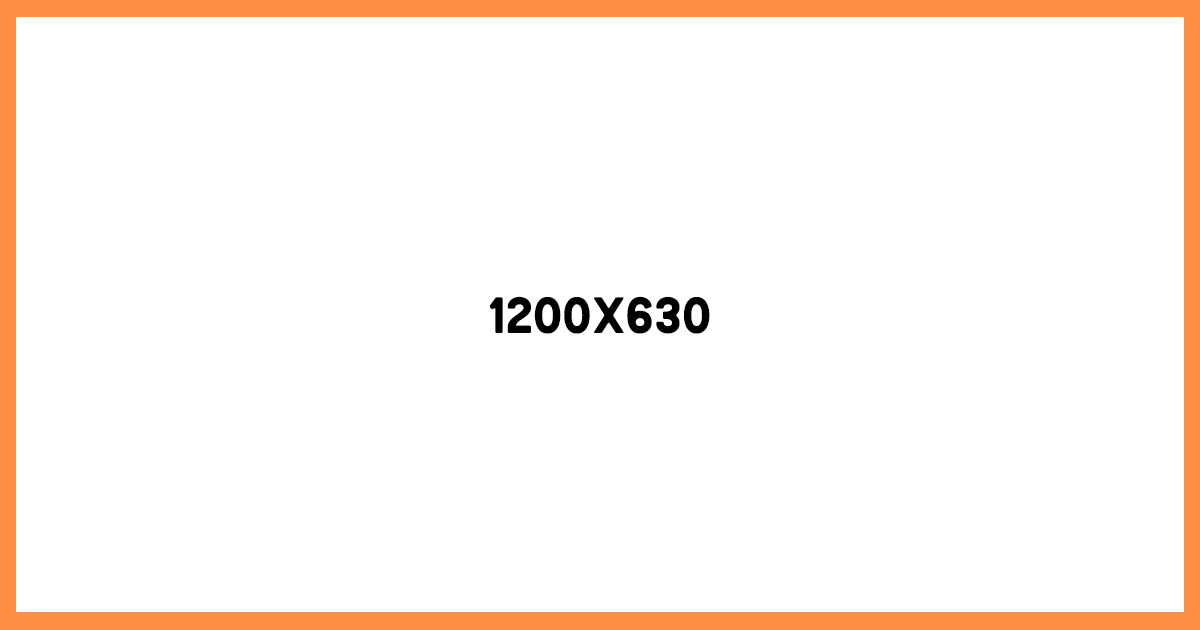
<style>
.page{position:relative;width:1200px;height:630px;background:#ffffff}
.page>*{position:absolute;margin:0}
.t1{font:50px "MarketFreshBoldAllCaps";color:#000000}
</style>
<div class="page">
<p class="t1" style="left:489px;top:296px;width:221px;height:38px">1200x630</p>
</div>
